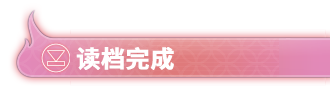
<style>
.page{position:relative;width:330px;height:90px;background:#ffffff}
.page>*{position:absolute;margin:0}
.t1{font:24px "SourceHanSansSC-Bold";color:#ffffff;font-weight:bold}
</style>
<div class="page">
<p class="t1" style="left:76px;top:47px;width:98px;height:23px">读档完成</p>
</div>
